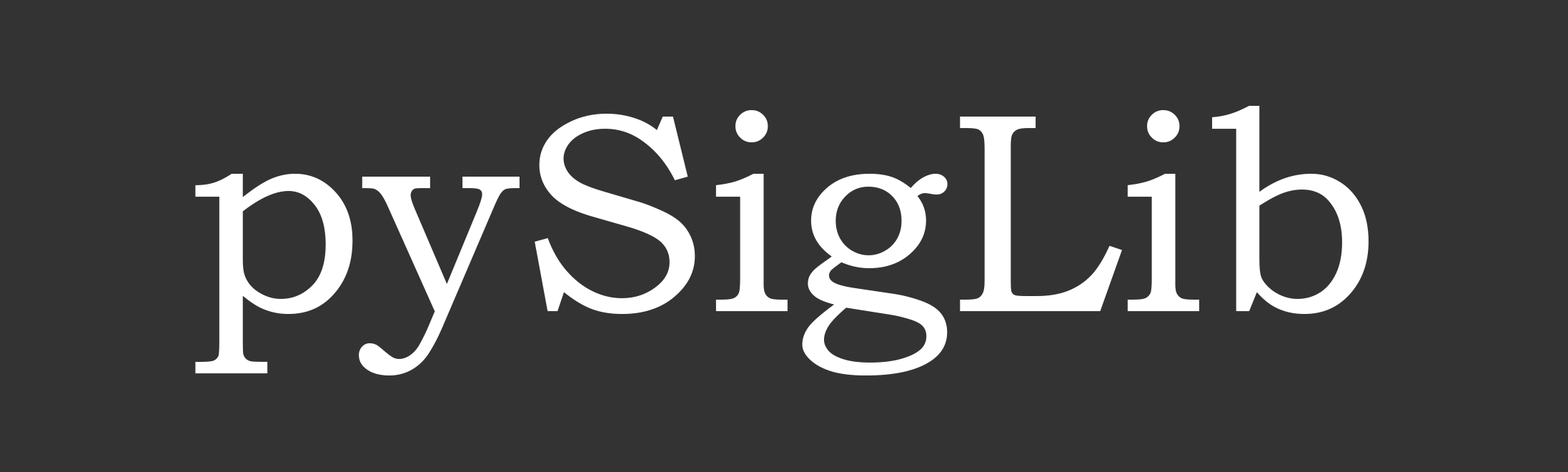
<style>
.page{position:relative;width:1568px;height:472px;background:#333333}
.page>*{position:absolute;margin:0}
.t1{font:285.9px "BookmanOldStyle";color:#ffffff}
</style>
<div class="page">
<p class="t1" style="left:195px;top:106px;width:1174px;height:269px">pySigLib</p>
</div>
